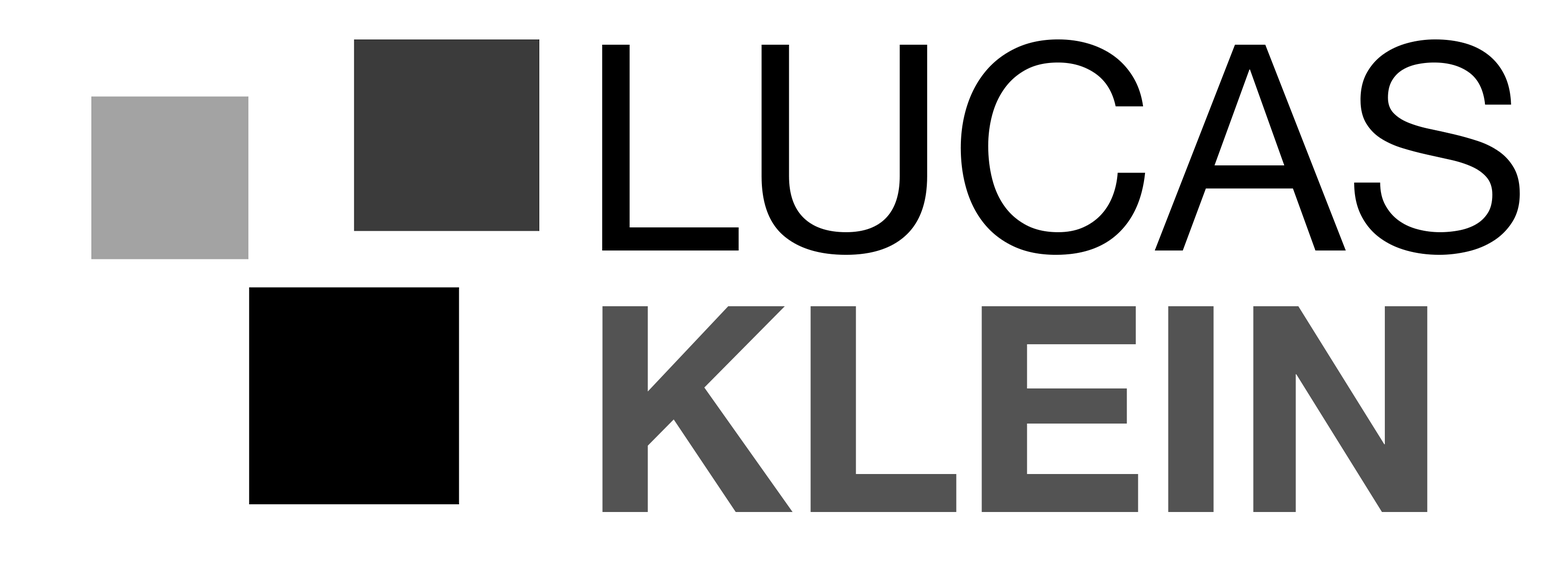
<style>
.page{position:relative;width:1568px;height:562px;background:#ffffff}
.page>*{position:absolute;margin:0}
.t1{font:288.4px "HelveticaNeue";color:#000000}
.t2{font:288.4px "HelveticaNeue-Bold";color:#535353}
</style>
<div class="page">
<p class="t1" style="left:602px;top:39px;width:918px;height:216px">LUCAS</p>
<p class="t2" style="left:602px;top:306px;width:826px;height:206px">KLEIN</p>
</div>
